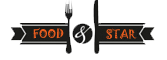
<style>
.page{position:relative;width:167px;height:60px;background:#ffffff}
.page>*{position:absolute;margin:0}
.t1{font:11px "Jokerman-Regular";color:#eb5d1e;text-transform:uppercase}
</style>
<div class="page">
<p class="t1" style="left:33px;top:27px;width:31px;height:12px">food</p>
<p class="t1" style="left:106px;top:28px;width:31px;height:11px">Star</p>
</div>
